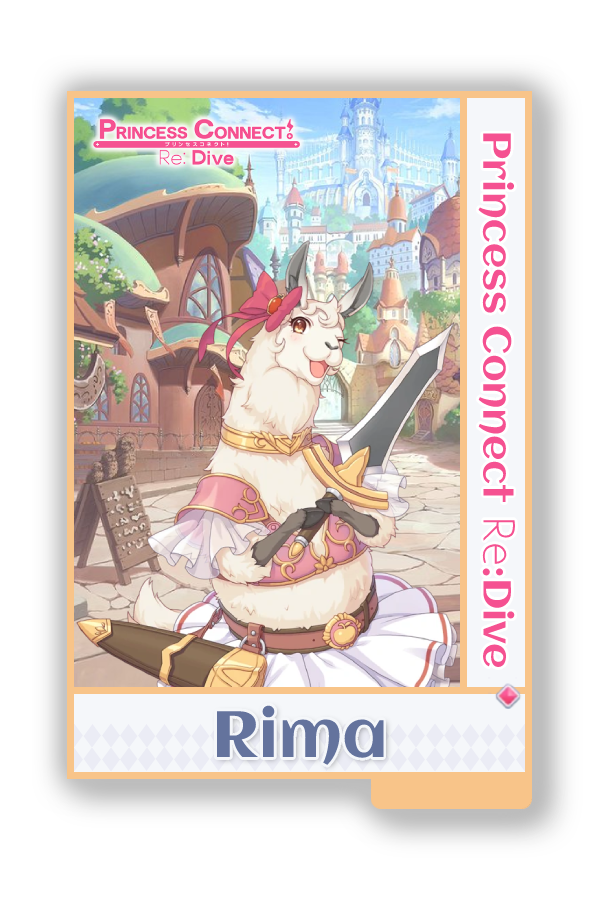
<style>
.page{position:relative;width:600px;height:900px;background:#ffffff}
.page>*{position:absolute;margin:0}
.t1{font:39px "Aclonica-Regular";color:#f55191}
.t2{font:39px "AaarghNormal";color:#f55191}
.t3{font:65px "Aclonica-Regular";color:#64739d}
</style>
<div class="page">
<p class="t1" style="left:478px;top:133px;width:38px;height:534px;rotate:90deg">Princess Connect <span class="t2">Re</span>:Dive</p>
<p class="t3" style="left:217px;top:705px;width:167px;height:60px">Rima</p>
</div>
